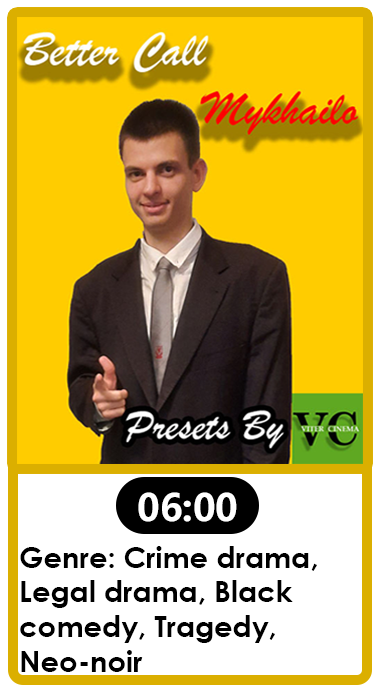
<style>
.page{position:relative;width:375px;height:687px;background:#ffcc00}
.page>*{position:absolute;margin:0}
.t1{font:36.9px "MicrosoftYaHei-Bold";color:#ffffff}
.t2{font:29px "CenturyGothic-Bold";color:#000000}
</style>
<div class="page">
<p class="t1" style="left:138px;top:492px;width:99px;height:30px">06:00</p>
<p class="t2" style="left:20px;top:546px;width:297px;height:126px">Genre: Crime drama, Legal drama, Black comedy, Tragedy, Neo-noir</p>
</div>
